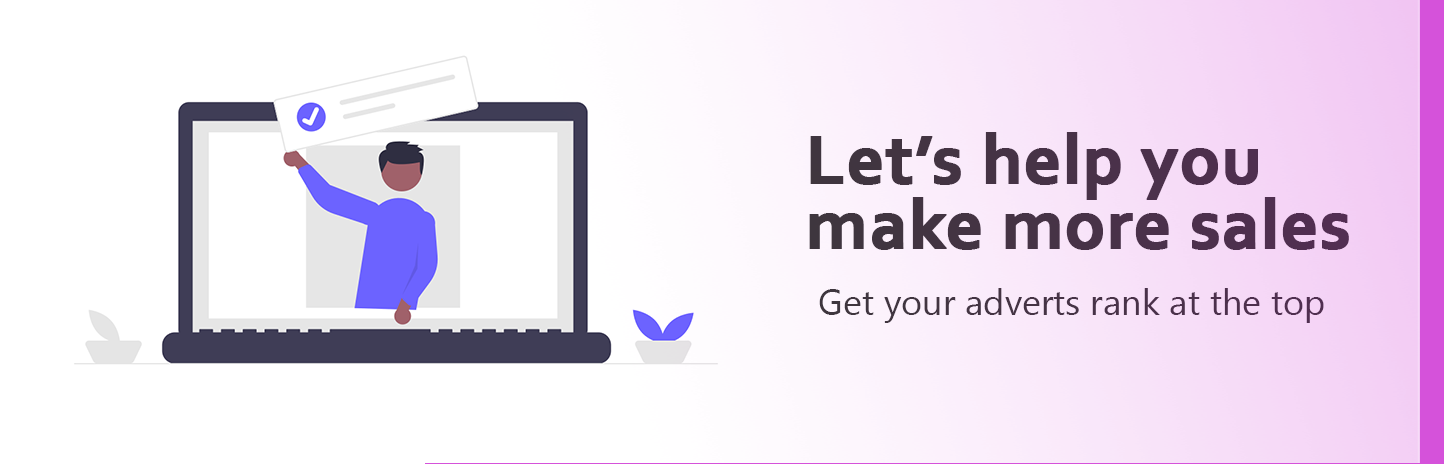
<style>
.page{position:relative;width:1444px;height:464px;background:#ffffff}
.page>*{position:absolute;margin:0}
.t1{font:72px/65px "Corbel-Bold";color:#393838;font-weight:bold}
.t2{font:36px "MyanmarText";color:#393838}
</style>
<div class="page">
<p class="t1" style="left:809px;top:132px;width:540px;height:118px">Let’s help you <br>make more sales</p>
<p class="t2" style="left:819px;top:288px;width:505px;height:35px">Get your adverts rank at the top</p>
</div>
